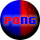
<style>
.page{position:relative;width:40px;height:40px}
.page>*{position:absolute;margin:0}
.t1{font:8px "8BITWONDERNominal"}
</style>
<div class="page">
<p class="t1" style="left:5px;top:17px;width:31px;height:7px">PONG</p>
</div>
